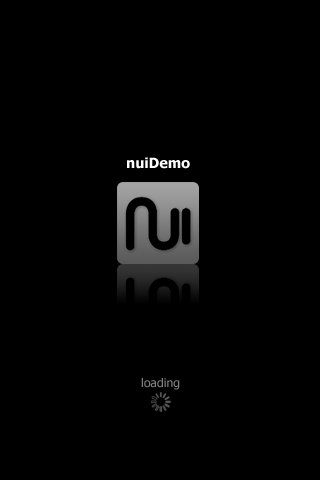
<style>
.page{position:relative;width:320px;height:480px;background:#000000}
.page>*{position:absolute;margin:0}
.t1{font:14px "Tahoma-Bold";letter-spacing:0.01em;color:#ffffff}
.t2{font:12px "Tahoma";letter-spacing:0.01em;color:#7f7f7f}
</style>
<div class="page">
<p class="t1" style="left:127px;top:157px;width:63px;height:12px">nuiDemo</p>
<p class="t2" style="left:141px;top:378px;width:39px;height:12px">loading</p>
</div>
